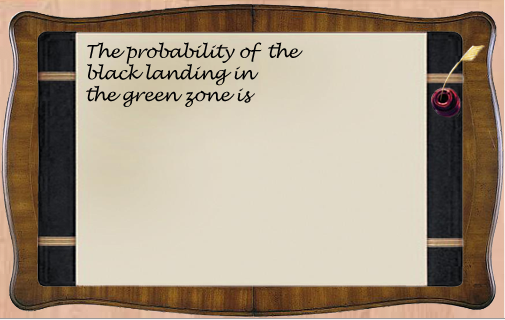
<style>
.page{position:relative;width:505px;height:320px}
.page>*{position:absolute;margin:0}
.t1{font:18px "LucidaHandwriting-Italic";letter-spacing:-0.025em;color:#010102}
</style>
<div class="page">
<p class="t1" style="left:86px;top:42px;width:217px;height:65px">The probability of  the<br>black landing in <br>the green zone is</p>
</div>
